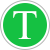
<style>
.page{position:relative;width:50px;height:50px;background:#15c142}
.page>*{position:absolute;margin:0}
.t1{font:41.7px "TimesNewRomanPSMT";letter-spacing:-0.01em;color:#ffffff}
</style>
<div class="page">
<p class="t1" style="left:13px;top:11px;width:24px;height:28px">T</p>
</div>
